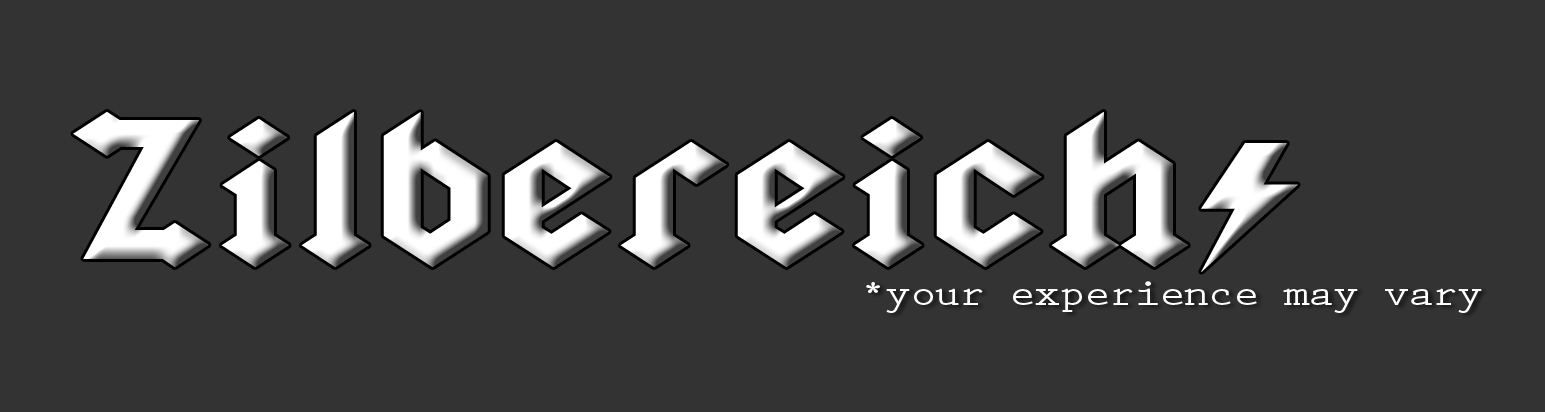
<style>
.page{position:relative;width:1545px;height:412px;background:#333333}
.page>*{position:absolute;margin:0}
.t1{font:170.1px "Squealer";letter-spacing:0.02em;color:#ffffff;scale:1.54 1}
.t2{font:37px "PrestigeEliteStd-Bd";letter-spacing:-0.04em;color:#ffffff;scale:1.2 1}
</style>
<div class="page">
<p class="t1" style="left:73px;top:112px;width:1225px;height:160px">Zilbereich*</p>
<p class="t2" style="left:866px;top:281px;width:616px;height:32px">*your experience may vary</p>
</div>
